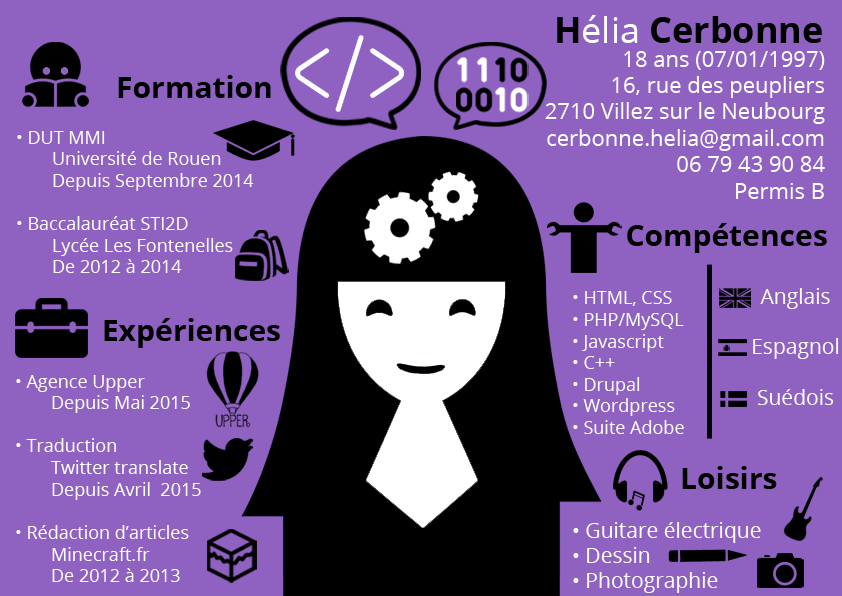
<style>
.page{position:relative;width:842px;height:596px;background:#8f62c2}
.page>*{position:absolute;margin:0}
.t1{font:30px "OpenSans-Bold";color:#000000}
.t2{font:18px "OpenSans";color:#ffffff}
.t3{font:21px "OpenSans";color:#ffffff}
</style>
<div class="page">
<p class="t1" style="left:118px;top:75px;width:153px;height:23px">Formation</p>
<p class="t2" style="left:17px;top:131px;width:237px;height:142px">• DUT MMI<br> Université de Rouen<br> Depuis Septembre 2014<br><br>• Baccalauréat STI2D<br> Lycée Les Fontenelles<br> De 2012 à 2014</p>
<p class="t2" style="left:573px;top:291px;width:111px;height:143px">• HTML, CSS<br>• PHP/MySQL<br>• Javascript<br>• C++<br>• Drupal<br>• Wordpress<br>• Suite Adobe</p>
<p class="t3" style="left:753px;top:288px;width:86px;height:117px;text-align:center">Anglais<br><br>Espagnol <br><br>Suédois</p>
<p class="t2" style="left:16px;top:375px;width:185px;height:207px">• Agence Upper<br> Depuis Mai 2015<br><br>• Traduction <br> Twitter translate<br> Depuis Avril  2015<br><br>• Rédaction d’articles<br> Minecraft.fr<br> De 2012 à 2013</p>
<p class="t3" style="left:573px;top:522px;width:188px;height:71px">• Guitare électrique<br>• Dessin<br>• Photographie</p>
</div>
